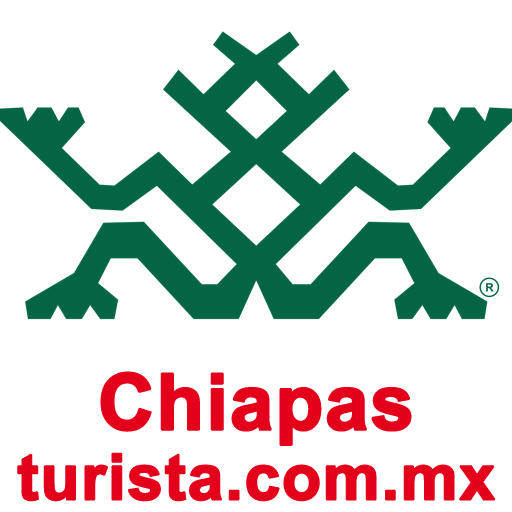
<style>
.page{position:relative;width:512px;height:512px;background:#ffffff}
.page>*{position:absolute;margin:0}
.t1{font:64px/70px "Arial-BoldMT";color:#e4001a;font-weight:bold}
.t2{font:78px/70px "Arial-BoldMT";color:#e4001a;font-weight:bold}
</style>
<div class="page">
<p class="t1" style="left:17px;top:371px;width:479px;height:131px;text-align:center"><span class="t2">Chiapas<br></span>turista.com.mx</p>
</div>
